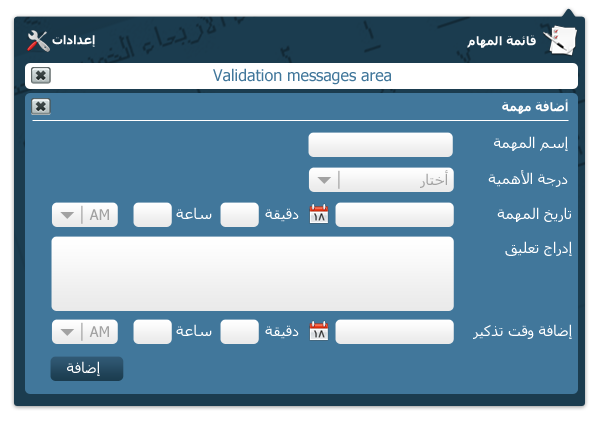
<style>
.page{position:relative;width:600px;height:422px;background:#41779b}
.page>*{position:absolute;margin:0}
.t1{font:12px "Tahoma-Bold";color:#ffffff}
.t2{font:16px "Tahoma";color:#41779b}
.t3{font:14.7px "Tahoma";color:#ffffff}
.t4{font:14.7px "Tahoma";color:#a2a2a2}
</style>
<div class="page">
<p class="t1" style="left:52px;top:35px;width:43px;height:12px">إعدادات</p>
<p class="t1" style="left:467px;top:35px;width:69px;height:13px">قائمة المهام</p>
<p class="t2" style="left:213px;top:68px;width:178px;height:17px">Validation messages area</p>
<p class="t1" style="left:502px;top:99px;width:66px;height:15px">أضافة مهمة</p>
<p class="t3" style="left:494px;top:136px;width:74px;height:15px">إسم المهمة</p>
<p class="t4" style="left:420px;top:170px;width:28px;height:18px">أختار</p>
<p class="t3" style="left:488px;top:170px;width:80px;height:17px">درجة الأهمية</p>
<p class="t4" style="left:89px;top:209px;width:20px;height:11px">AM</p>
<p class="t3" style="left:176px;top:207px;width:36px;height:12px">ساعة</p>
<p class="t3" style="left:265px;top:208px;width:34px;height:14px">دقيقة</p>
<p class="t3" style="left:497px;top:207px;width:74px;height:15px">تاريخ المهمة</p>
<p class="t3" style="left:505px;top:241px;width:67px;height:15px">إدراج تعليق</p>
<p class="t4" style="left:89px;top:326px;width:20px;height:11px">AM</p>
<p class="t3" style="left:176px;top:324px;width:36px;height:12px">ساعة</p>
<p class="t3" style="left:265px;top:325px;width:34px;height:14px">دقيقة</p>
<p class="t3" style="left:473px;top:324px;width:99px;height:15px">إضافة وقت تذكير</p>
<p class="t3" style="left:67px;top:361px;width:33px;height:15px">إضافة</p>
</div>
